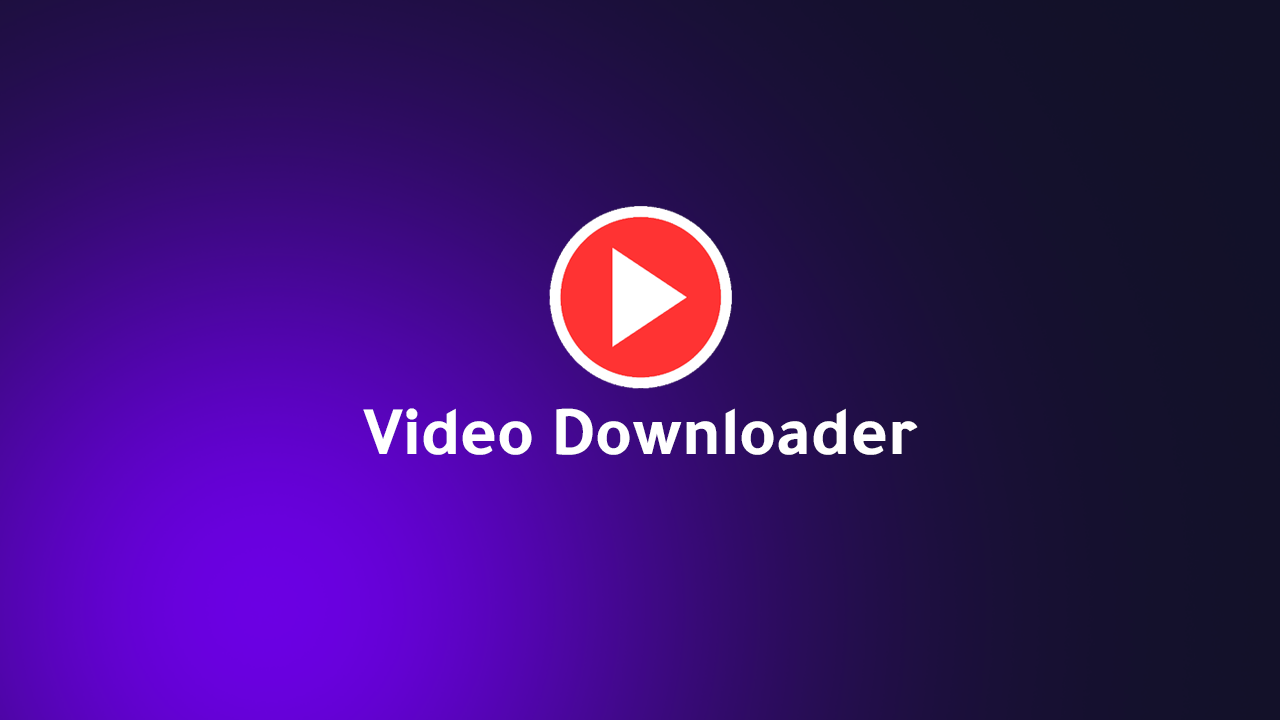
<style>
.page{position:relative;width:1280px;height:720px}
.page>*{position:absolute;margin:0}
.t1{font:70.3px "Tajawal-Bold";color:#ffffff}
</style>
<div class="page">
<p class="t1" style="left:363px;top:408px;width:555px;height:47px">Video Downloader</p>
</div>
